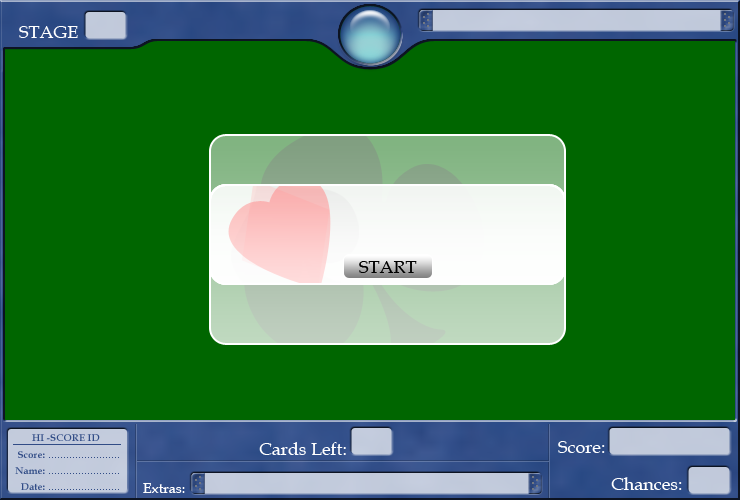
<style>
.page{position:relative;width:740px;height:500px;background:#006600}
.page>*{position:absolute;margin:0}
.t1{font:18px "BookAntiqua";color:#ffffff}
.t2{font:18px "BookAntiqua";color:#000000}
.t3{font:10px "BookAntiqua-Bold";color:#314c86}
.t4{font:14px "BookAntiqua";color:#ffffff}
</style>
<div class="page">
<p class="t1" style="left:19px;top:26px;width:59px;height:12px">STAGE</p>
<p class="t2" style="left:359px;top:261px;width:58px;height:12px">START</p>
<p class="t3" style="left:32px;top:434px;width:68px;height:7px">HI -SCORE ID</p>
<p class="t1" style="left:259px;top:442px;width:87px;height:13px">Cards Left:</p>
<p class="t1" style="left:558px;top:441px;width:47px;height:12px">Score:</p>
<p class="t3" style="left:18px;top:451px;width:27px;height:7px">Score:</p>
<p class="t3" style="left:15px;top:467px;width:30px;height:7px">Name:</p>
<p class="t3" style="left:21px;top:483px;width:24px;height:7px">Date:</p>
<p class="t4" style="left:143px;top:483px;width:42px;height:10px">Extras:</p>
<p class="t1" style="left:611px;top:477px;width:71px;height:13px">Chances:</p>
</div>
